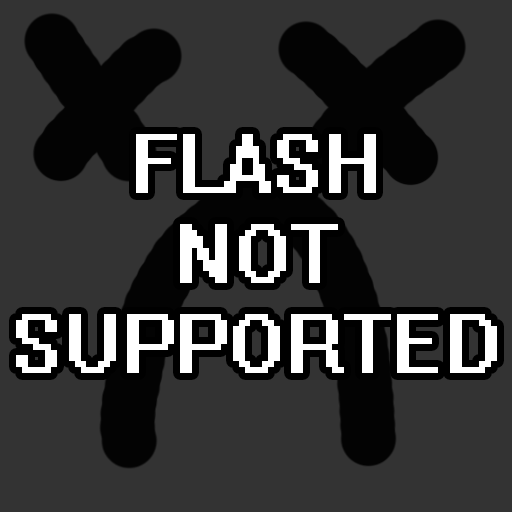
<style>
.page{position:relative;width:512px;height:512px;background:#333333}
.page>*{position:absolute;margin:0}
.t1{font:75px "System";color:#ffffff}
</style>
<div class="page">
<p class="t1" style="left:16px;top:134px;width:481px;height:239px;text-align:center">FLASH<br>NOT<br>SUPPORTED</p>
</div>
